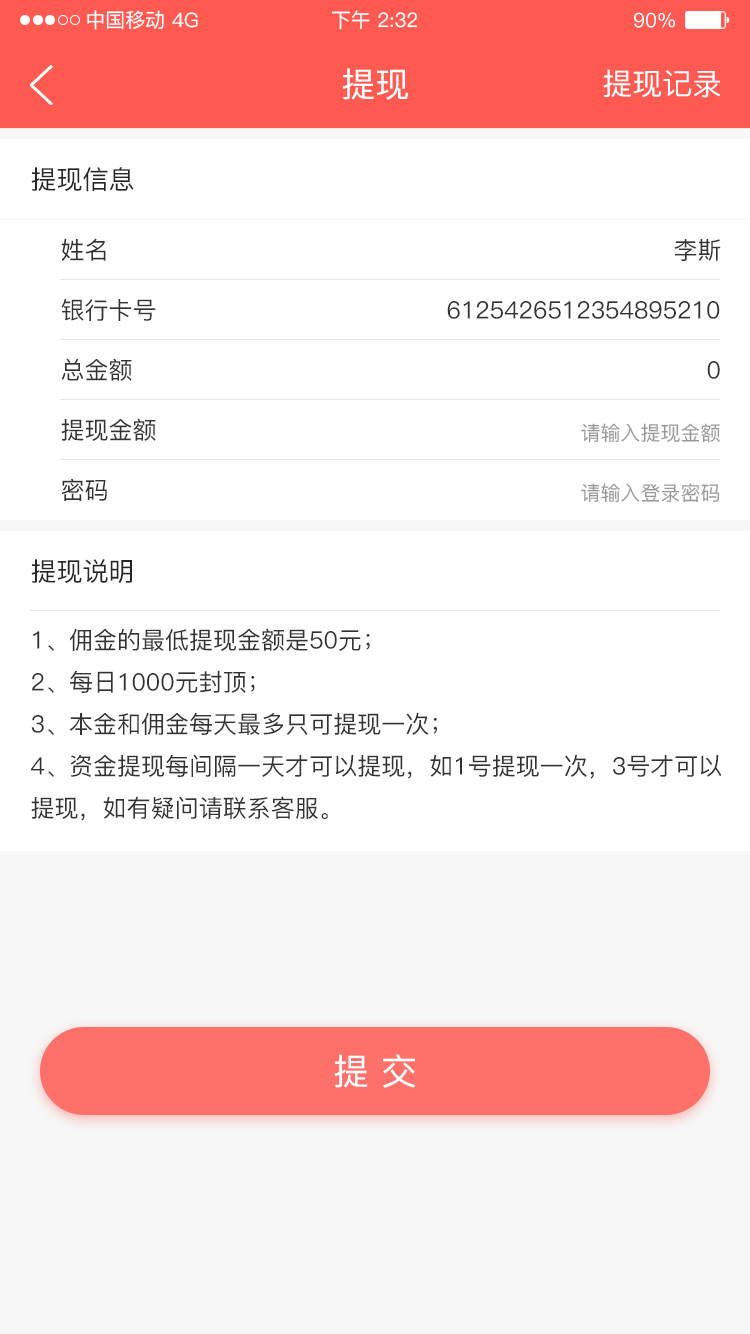
<style>
.page{position:relative;width:750px;height:1334px;background:#ffffff}
.page>*{position:absolute;margin:0}
.t1{font:20px "PingFang-SC-Medium";color:#ffffff}
.t2{font:34px "PingFang-SC-Medium";color:#ffffff}
.t3{font:30px "PingFang-SC-Medium";color:#fffefe}
.t4{font:26px "PingFang-SC-Medium";color:#262626}
.t5{font:24px "PingFang-SC-Medium";color:#333333}
.t6{font:20px "PingFang-SC-Medium";color:#999999}
.t7{font:36px "PingFang-SC-Medium";color:#ffffff}
</style>
<div class="page">
<p class="t1" style="left:87px;top:10px;width:77px;height:20px">中国移动</p>
<p class="t1" style="left:172px;top:12px;width:26px;height:16px">4G</p>
<p class="t1" style="left:331px;top:10px;width:87px;height:20px">下午 2:32</p>
<p class="t1" style="left:634px;top:12px;width:41px;height:16px">90%</p>
<p class="t2" style="left:342px;top:68px;width:66px;height:32px">提现</p>
<p class="t3" style="left:603px;top:69px;width:118px;height:29px">提现记录</p>
<p class="t4" style="left:31px;top:167px;width:103px;height:25px">提现信息</p>
<p class="t5" style="left:61px;top:238px;width:45px;height:23px">姓名</p>
<p class="t5" style="left:674px;top:239px;width:47px;height:22px">李斯</p>
<p class="t5" style="left:61px;top:299px;width:95px;height:22px">银行卡号</p>
<p class="t5" style="left:447px;top:301px;width:273px;height:18px">6125426512354895210</p>
<p class="t5" style="left:61px;top:358px;width:71px;height:23px">总金额</p>
<p class="t5" style="left:707px;top:361px;width:13px;height:18px">0</p>
<p class="t5" style="left:61px;top:418px;width:95px;height:23px">提现金额</p>
<p class="t6" style="left:581px;top:423px;width:139px;height:20px">请输入提现金额</p>
<p class="t5" style="left:61px;top:478px;width:46px;height:23px">密码</p>
<p class="t6" style="left:581px;top:483px;width:139px;height:20px">请输入登录密码</p>
<p class="t4" style="left:31px;top:559px;width:101px;height:25px">提现说明</p>
<p class="t5" style="left:31px;top:628px;width:691px;height:193px">1、佣金的最低提现金额是50元；<br>2、每日1000元封顶；<br>3、本金和佣金每天最多只可提现一次；<br>4、资金提现每间隔一天才可以提现，如1号提现一次，3号才可以<br>提现，如有疑问请联系客服。</p>
<p class="t7" style="left:334px;top:1054px;width:82px;height:34px">提 交</p>
</div>
